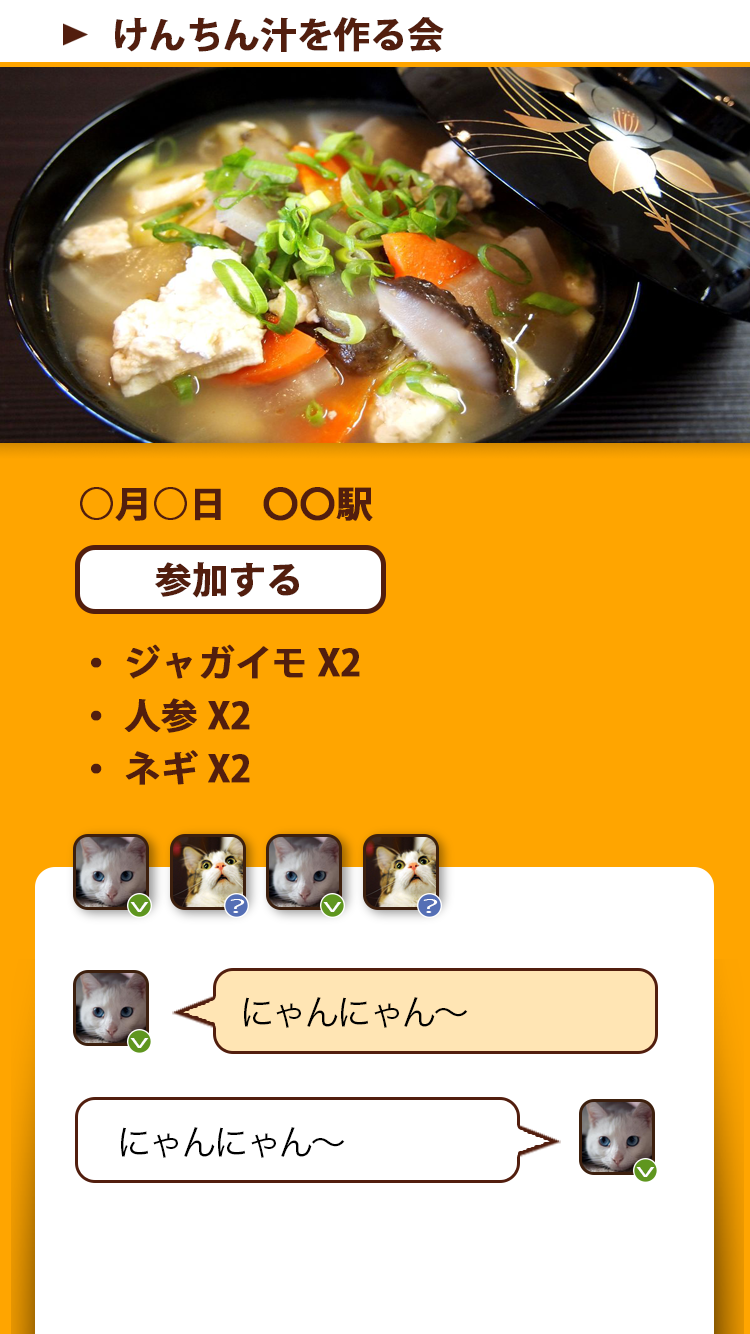
<style>
.page{position:relative;width:750px;height:1334px;background:#ffffff}
.page>*{position:absolute;margin:0}
.t1{font:36px "KozGoPr6N-Bold";color:#521e0e;font-weight:bold}
.t2{font:36px/53px "KozGoPr6N-Bold";color:#521e0e;font-weight:bold}
.t3{font:20.2px "AndaleMono";letter-spacing:-0.1em;color:#ffffff;scale:1.94 1}
.t4{font:36px "HiraKakuProN-W3";letter-spacing:-0.1em;color:#000000}
</style>
<div class="page">
<p class="t1" style="left:115px;top:17px;width:329px;height:35px">けんちん汁を作る会</p>
<p class="t2" style="left:80px;top:487px;width:293px;height:298px">○月○日　〇〇駅<br><br><br>・ジャガイモX2<br>・人参X2<br>・ネギX2</p>
<p class="t1" style="left:155px;top:562px;width:144px;height:36px">参加する</p>
<p class="t3" style="left:130px;top:902px;width:19px;height:10px">v</p>
<p class="t3" style="left:230px;top:899px;width:15px;height:14px">?</p>
<p class="t3" style="left:323px;top:902px;width:19px;height:10px">v</p>
<p class="t3" style="left:423px;top:899px;width:15px;height:14px">?</p>
<p class="t4" style="left:244px;top:997px;width:224px;height:31px">にゃんにゃん〜</p>
<p class="t3" style="left:130px;top:1038px;width:19px;height:10px">v</p>
<p class="t4" style="left:121px;top:1127px;width:224px;height:31px">にゃんにゃん〜</p>
<p class="t3" style="left:636px;top:1167px;width:19px;height:10px">v</p>
</div>
